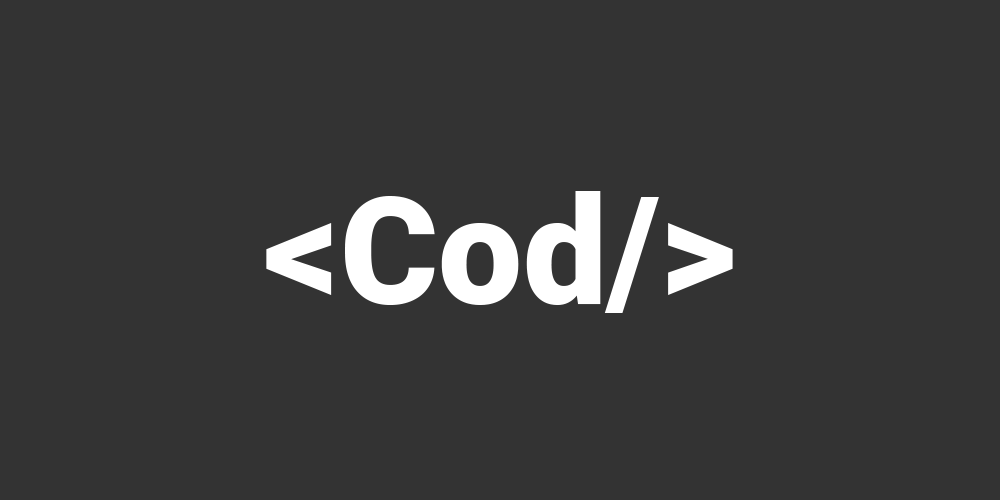
<style>
.page{position:relative;width:1000px;height:500px;background:#333333}
.page>*{position:absolute;margin:0}
.t1{font:150px "Roboto-Black";color:#ffffff}
</style>
<div class="page">
<p class="t1" style="left:266px;top:191px;width:467px;height:122px">&lt;Cod/&gt;</p>
<p class="t1" style="left:266px;top:191px;width:467px;height:122px">&lt;Cod/&gt;</p>
<p class="t1" style="left:266px;top:191px;width:467px;height:122px">&lt;Cod/&gt;</p>
</div>
